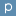
<style>
.page{position:relative;width:16px;height:16px;background:#5d8caf}
.page>*{position:absolute;margin:0}
.t1{font:15.8px "Champagne&Limousines-Bold";color:#ffffff;scale:0.95 1}
</style>
<div class="page">
<p class="t1" style="left:5px;top:3px;width:8px;height:11px">p</p>
</div>
